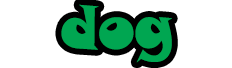
<style>
.page{position:relative;width:232px;height:68px;background:#ffffff}
.page>*{position:absolute;margin:0}
.t1{font:60px "SnapITC-Regular";color:#00a651}
</style>
<div class="page">
<p class="t1" style="left:61px;top:4px;width:111px;height:59px">dog</p>
</div>
